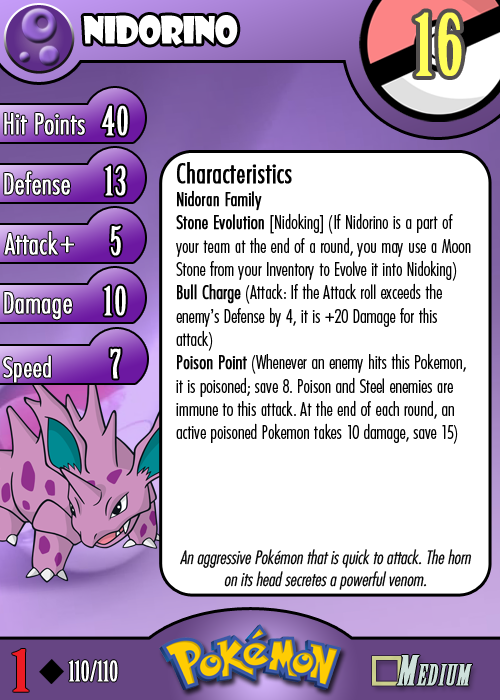
<style>
.page{position:relative;width:500px;height:700px;background:#ffffff}
.page>*{position:absolute;margin:0}
.t1{font:36.7px "ShowcardGothic-Reg";letter-spacing:-0.025em;color:#ffffff;scale:0.91 1}
.t2{font:83.3px "BirchStd";letter-spacing:0.025em;color:#fffd59;font-weight:bold}
.t3{font:27.8px "Futura-CondensedLight";color:#ffffff;font-weight:bold}
.t4{font:38.9px "BirchStd";letter-spacing:0.035em;color:#ffffff;font-weight:bold}
.t5{font:19.4px "FuturaCondensedBQ-Light";color:#010101}
.t6{font:27.8px "FuturaCondensedBQ-Light";color:#010101;font-weight:bold}
.t7{font:19.4px "FuturaCondensedBQ-Light";color:#010101;font-weight:bold}
.t8{font:30.6px "Futura-CondensedLight";color:#ffffff;font-weight:bold}
.t9{font:27.8px "FuturaCondensedBQ-Light";color:#ffffff;font-weight:bold}
.t10{font:18.1px "Futura-CondensedLight";color:#010101;font-style:italic}
.t11{font:55.6px "BirchStd";color:#ed1c24;font-weight:bold;scale:1.5 1}
.t12{font:27.8px "BirchStd";color:#ffffff;font-weight:bold}
</style>
<div class="page">
<p class="t1" style="left:83px;top:15px;width:155px;height:31px">nidorino</p>
<p class="t2" style="left:415px;top:12px;width:47px;height:64px">16</p>
<p class="t3" style="left:4px;top:113px;width:81px;height:22px">Hit Points</p>
<p class="t4" style="left:102px;top:105px;width:26px;height:31px">40</p>
<p class="t3" style="left:4px;top:171px;width:66px;height:24px">Defense</p>
<p class="t4" style="left:105px;top:165px;width:21px;height:31px">13</p>
<p class="t5" style="left:176px;top:162px;width:295px;height:282px"><span class="t6">Characteristics<br></span><span class="t7">Nidoran Family<br>Stone Evolution </span>[Nidoking] (If Nidorino is a part of your team at the end of a round, you may use a Moon Stone from your Inventory to Evolve it into Nidoking)<br><span class="t7">Bull Charge</span> (Attack: If the Attack roll exceeds the enemy’s Defense by 4, it is +20 Damage for this attack)<br><span class="t7">Poison Point</span> (Whenever an enemy hits this Pokemon, it is poisoned; save 8. Poison and Steel enemies are immune to this attack. At the end of each round, an active poisoned Pokemon takes 10 damage, save 15)</p>
<p class="t3" style="left:4px;top:231px;width:54px;height:24px">Attack</p>
<p class="t4" style="left:111px;top:225px;width:10px;height:31px">5</p>
<p class="t8" style="left:60px;top:236px;width:14px;height:17px">+</p>
<p class="t3" style="left:4px;top:292px;width:68px;height:28px">Damage</p>
<p class="t4" style="left:104px;top:285px;width:22px;height:31px">10</p>
<p class="t4" style="left:110px;top:348px;width:11px;height:31px">7</p>
<p class="t9" style="left:3px;top:355px;width:48px;height:28px">Speed</p>
<p class="t10" style="left:180px;top:549px;width:292px;height:41px;text-align:center">An aggressive Pokémon that is quick to attack. The horn on its head secretes a powerful venom.</p>
<p class="t11" style="left:12px;top:649px;width:17px;height:43px">1</p>
<p class="t12" style="left:68px;top:660px;width:50px;height:22px">110/110</p>
</div>
